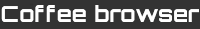
<style>
.page{position:relative;width:200px;height:29px;background:#333333}
.page>*{position:absolute;margin:0}
.t1{font:22.5px "Orbitron-Bold";color:#ffffff}
</style>
<div class="page">
<p class="t1" style="left:1px;top:5px;width:198px;height:17px">Coffee browser</p>
</div>
